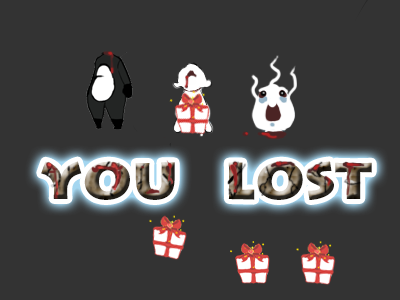
<style>
.page{position:relative;width:400px;height:300px;background:#333333}
.page>*{position:absolute;margin:0}
.t1{font:60px "LithosPro-Black"}
</style>
<div class="page">
<p class="t1" style="left:41px;top:161px;width:331px;height:39px">you   lost</p>
</div>
